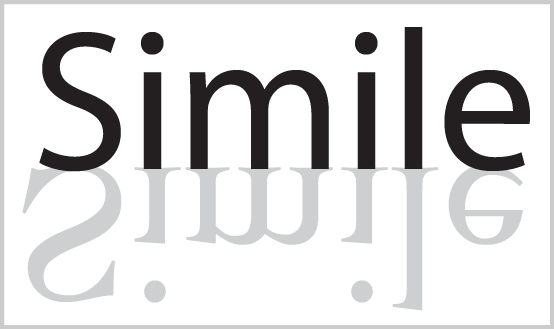
<style>
.page{position:relative;width:554px;height:329px;background:#ffffff}
.page>*{position:absolute;margin:0}
.t1{font:200px "Myriad-Roman";color:#231f20}
.t2{font:200px "Cochin";color:#cdcfd0}
</style>
<div class="page">
<p class="t1" style="left:39px;top:27px;width:491px;height:145px">Simile</p>
<p class="t2" style="left:22px;top:164px;width:501px;height:147px">Simile</p>
</div>
